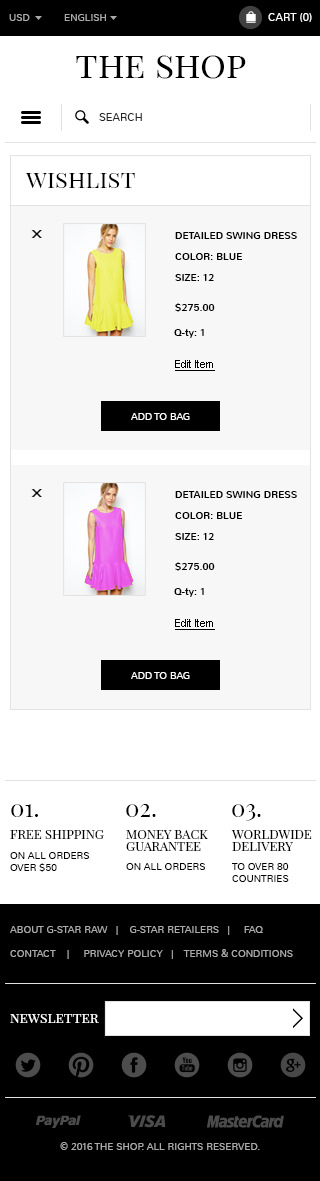
<style>
.page{position:relative;width:320px;height:1181px;background:#ffffff}
.page>*{position:absolute;margin:0}
.t1{font:10px "Nunito-Light";color:#aaaaaa;text-transform:uppercase}
.t2{font:11px "Nunito-Light";color:#ffffff;text-transform:uppercase}
.t3{font:36px "PlayfairDisplaySC-Regular";color:#000000}
.t4{font:11px "Nunito-Light";color:#282828;text-transform:uppercase}
.t5{font:24px "PlayfairDisplaySC-Regular";color:#000000}
.t6{font:10px "Nunito-Regular";color:#000000;text-transform:uppercase}
.t7{font:10px "Nunito-Regular";color:#000000}
.t8{font:11px "ArialMT";color:#000000;text-decoration:underline}
.t9{font:10px "Nunito-Light";color:#ffffff;text-transform:uppercase}
.t10{font:13px "PlayfairDisplaySC-Regular";color:#000000;text-transform:uppercase}
.t11{font:13px/12px "PlayfairDisplaySC-Regular";color:#000000;text-transform:uppercase}
.t12{font:10px "Nunito-Light";color:#000000;text-transform:uppercase}
.t13{font:10px/24px "Nunito-Light";color:#aaaaaa;text-transform:uppercase}
.t14{font:14px "PlayfairDisplaySC-Regular";color:#ffffff}
</style>
<div class="page">
<p class="t1" style="left:9px;top:14px;width:21px;height:7px">usD</p>
<p class="t1" style="left:64px;top:14px;width:42px;height:7px">English</p>
<p class="t2" style="left:268px;top:13px;width:44px;height:9px">Cart (0)</p>
<p class="t3" style="left:76px;top:55px;width:170px;height:24px">the shop</p>
<p class="t4" style="left:99px;top:113px;width:43px;height:8px">search</p>
<p class="t5" style="left:25px;top:173px;width:110px;height:15px">wishlist</p>
<p class="t6" style="left:175px;top:232px;width:122px;height:7px">detailed swing dress</p>
<p class="t6" style="left:175px;top:253px;width:67px;height:7px">color: blue</p>
<p class="t6" style="left:175px;top:274px;width:39px;height:7px">size: 12</p>
<p class="t6" style="left:175px;top:303px;width:40px;height:9px">$275.00</p>
<p class="t7" style="left:174px;top:329px;width:30px;height:9px">Q-ty: 1</p>
<p class="t8" style="left:175px;top:360px;width:40px;height:11px">Edit Item</p>
<p class="t9" style="left:131px;top:413px;width:59px;height:7px">add to bag</p>
<p class="t6" style="left:175px;top:491px;width:122px;height:7px">detailed swing dress</p>
<p class="t6" style="left:175px;top:512px;width:67px;height:7px">color: blue</p>
<p class="t6" style="left:175px;top:533px;width:39px;height:7px">size: 12</p>
<p class="t6" style="left:175px;top:562px;width:40px;height:9px">$275.00</p>
<p class="t7" style="left:174px;top:588px;width:30px;height:9px">Q-ty: 1</p>
<p class="t8" style="left:175px;top:619px;width:40px;height:11px">Edit Item</p>
<p class="t9" style="left:131px;top:672px;width:59px;height:7px">add to bag</p>
<p class="t5" style="left:11px;top:804px;width:27px;height:13px">01.</p>
<p class="t5" style="left:126px;top:804px;width:30px;height:13px">02.</p>
<p class="t5" style="left:232px;top:804px;width:29px;height:17px">03.</p>
<p class="t10" style="left:10px;top:830px;width:94px;height:9px">Free Shipping</p>
<p class="t11" style="left:126px;top:830px;width:82px;height:21px">Money back<br>guarantee</p>
<p class="t11" style="left:231px;top:830px;width:81px;height:21px">Worldwide<br>Delivery</p>
<p class="t12" style="left:10px;top:852px;width:80px;height:20px">On all orders<br>over $50</p>
<p class="t12" style="left:126px;top:863px;width:80px;height:7px">On all orders</p>
<p class="t12" style="left:232px;top:863px;width:57px;height:19px">To over 80<br>countries</p>
<p class="t13" style="left:10px;top:926px;width:283px;height:33px">About G-Star Raw   |    G-Star Retailers   |     FAQ<br>Contact    |     Privacy Policy   |    Terms &amp; Conditions</p>
<p class="t14" style="left:10px;top:1014px;width:89px;height:9px">newsletter</p>
<p class="t1" style="left:60px;top:1142px;width:200px;height:8px">© 2016 the shop. All Rights Reserved.</p>
</div>
